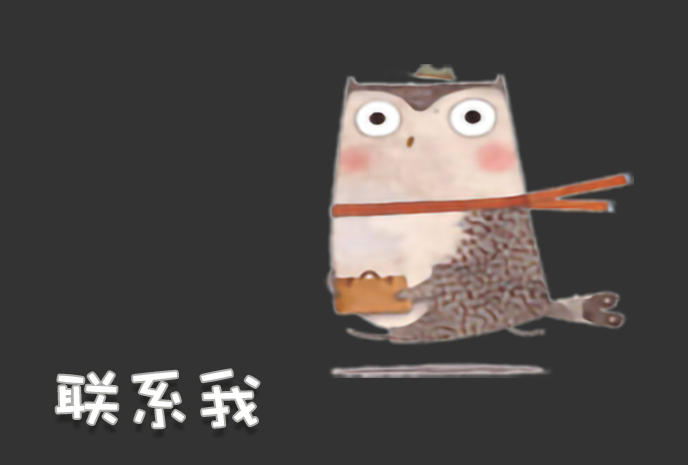
<style>
.page{position:relative;width:688px;height:465px;background:#333333}
.page>*{position:absolute;margin:0}
.t1{font:71.9px "DFPWaWaW5";letter-spacing:-0.05em;color:#ffffff;text-transform:uppercase;font-weight:bold}
</style>
<div class="page">
<p class="t1" style="left:56px;top:370px;width:203px;height:58px">联系我</p>
</div>
